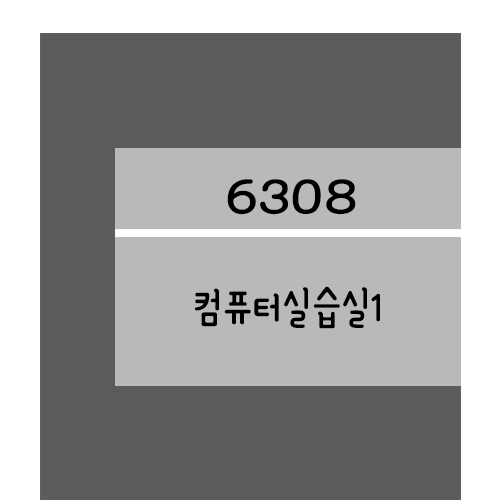
<style>
.page{position:relative;width:500px;height:500px;background:#5d5a5a}
.page>*{position:absolute;margin:0}
.t1{font:61.2px "YanoljaYacheR";color:#000000;scale:1.18 1}
.t2{font:48px "YanoljaYacheR";color:#000000}
</style>
<div class="page">
<p class="t1" style="left:227px;top:179px;width:129px;height:36px">6308</p>
<p class="t2" style="left:195px;top:286px;width:185px;height:43px">컴퓨터실습실1</p>
</div>
